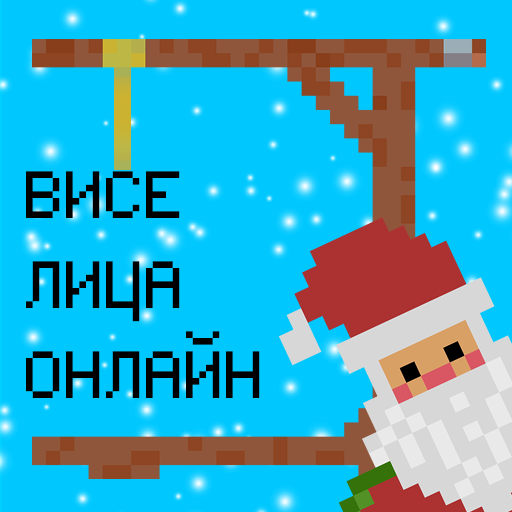
<style>
.page{position:relative;width:512px;height:512px;background:#00c8ff}
.page>*{position:absolute;margin:0}
.t1{font:80px/90px "Fairfax";color:#000000}
</style>
<div class="page">
<p class="t1" style="left:26px;top:171px;width:234px;height:227px">ВИСЕ<br>ЛИЦА<br>ОНЛАЙН</p>
</div>
